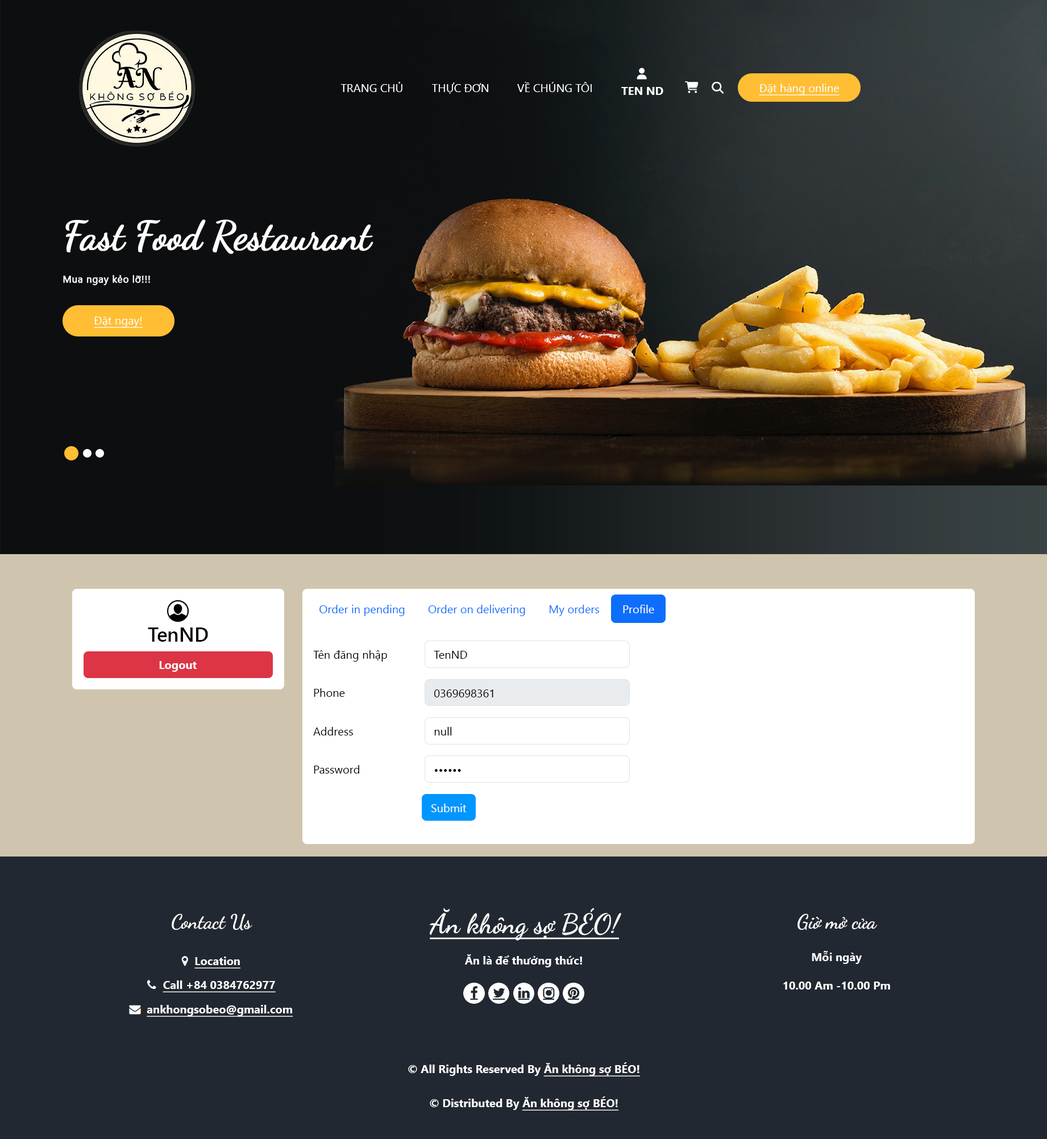
<style>
.page{position:relative;width:1047px;height:1139px;background:#222831}
.page>*{position:absolute;margin:0}
.t1{font:11.4px "SegoeUI";color:#ffffff}
.t2{font:11.4px "SegoeUI-Bold";color:#ffffff}
.t3{font:11.4px "SegoeUI";color:#ffffff;text-decoration:underline}
.t4{font:39.8px "DancingScript-Regular";letter-spacing:-0.02em;color:#ffffff;font-weight:bold}
.t5{font:9.7px "SegoeUI";letter-spacing:0.023em;color:#ffffff;font-weight:bold}
.t6{font:11.4px "SegoeUI";color:#0d6efd}
.t7{font:19.9px "SegoeUI-Semibold";color:#000000}
.t8{font:11.4px "SegoeUI";color:#000000}
.t9{font:19.9px "DancingScript-Bold";color:#ffffff}
.t10{font:27.3px "DancingScript-Bold";color:#ffffff;text-decoration:underline}
.t11{font:11.4px "SegoeUI-Bold";color:#ffffff;text-decoration:underline}
</style>
<div class="page">
<p class="t1" style="left:340px;top:82px;width:62px;height:10px">TRANG CHỦ</p>
<p class="t1" style="left:432px;top:82px;width:56px;height:12px">THỰC ĐƠN</p>
<p class="t1" style="left:517px;top:82px;width:75px;height:10px">VỀ CHÚNG TÔI</p>
<p class="t2" style="left:621px;top:87px;width:42px;height:8px">TEN ND</p>
<p class="t3" style="left:759px;top:84px;width:80px;height:11px">Đặt hàng online</p>
<p class="t4" style="left:65px;top:219px;width:308px;height:35px">Fast Food Restaurant</p>
<p class="t5" style="left:63px;top:275px;width:87px;height:10px">Mua ngay kẻo lỡ!!!</p>
<p class="t3" style="left:94px;top:317px;width:49px;height:11px">Đặt ngay!</p>
<p class="t6" style="left:319px;top:605px;width:86px;height:11px">Order in pending</p>
<p class="t6" style="left:428px;top:605px;width:97px;height:11px">Order on delivering</p>
<p class="t6" style="left:550px;top:605px;width:49px;height:11px">My orders</p>
<p class="t1" style="left:623px;top:605px;width:31px;height:8px">Profile</p>
<p class="t7" style="left:148px;top:627px;width:60px;height:15px">TenND</p>
<p class="t8" style="left:313px;top:650px;width:74px;height:12px">Tên đăng nhập</p>
<p class="t8" style="left:434px;top:651px;width:33px;height:8px">TenND</p>
<p class="t2" style="left:159px;top:661px;width:38px;height:11px">Logout</p>
<p class="t8" style="left:314px;top:688px;width:31px;height:9px">Phone</p>
<p class="t8" style="left:434px;top:689px;width:59px;height:8px">0369698361</p>
<p class="t8" style="left:313px;top:727px;width:40px;height:8px">Address</p>
<p class="t8" style="left:434px;top:727px;width:18px;height:8px">null</p>
<p class="t8" style="left:314px;top:765px;width:45px;height:9px">Password</p>
<p class="t8" style="left:434px;top:769px;width:27px;height:3px">••••••</p>
<p class="t1" style="left:431px;top:804px;width:36px;height:8px">Submit</p>
<p class="t9" style="left:172px;top:913px;width:80px;height:17px">Contact Us</p>
<p class="t10" style="left:430px;top:908px;width:191px;height:33px">Ăn không sợ BÉO!</p>
<p class="t9" style="left:797px;top:913px;width:80px;height:17px">Giờ mở cửa</p>
<p class="t2" style="left:812px;top:951px;width:50px;height:13px">Mỗi ngày</p>
<p class="t11" style="left:194px;top:957px;width:46px;height:11px">Location</p>
<p class="t2" style="left:465px;top:954px;width:117px;height:13px">Ăn là để thưởng thức!</p>
<p class="t11" style="left:163px;top:980px;width:113px;height:12px">Call +84 0384762977</p>
<p class="t2" style="left:783px;top:982px;width:107px;height:8px">10.00 Am -10.00 Pm</p>
<p class="t11" style="left:147px;top:1005px;width:146px;height:12px">ankhongsobeo@gmail.com</p>
<p class="t2" style="left:408px;top:1062px;width:232px;height:14px">© All Rights Reserved By <span class="t11">Ăn không sợ BÉO!</span></p>
<p class="t2" style="left:430px;top:1096px;width:189px;height:15px">© Distributed By <span class="t11">Ăn không sợ BÉO!</span></p>
</div>
